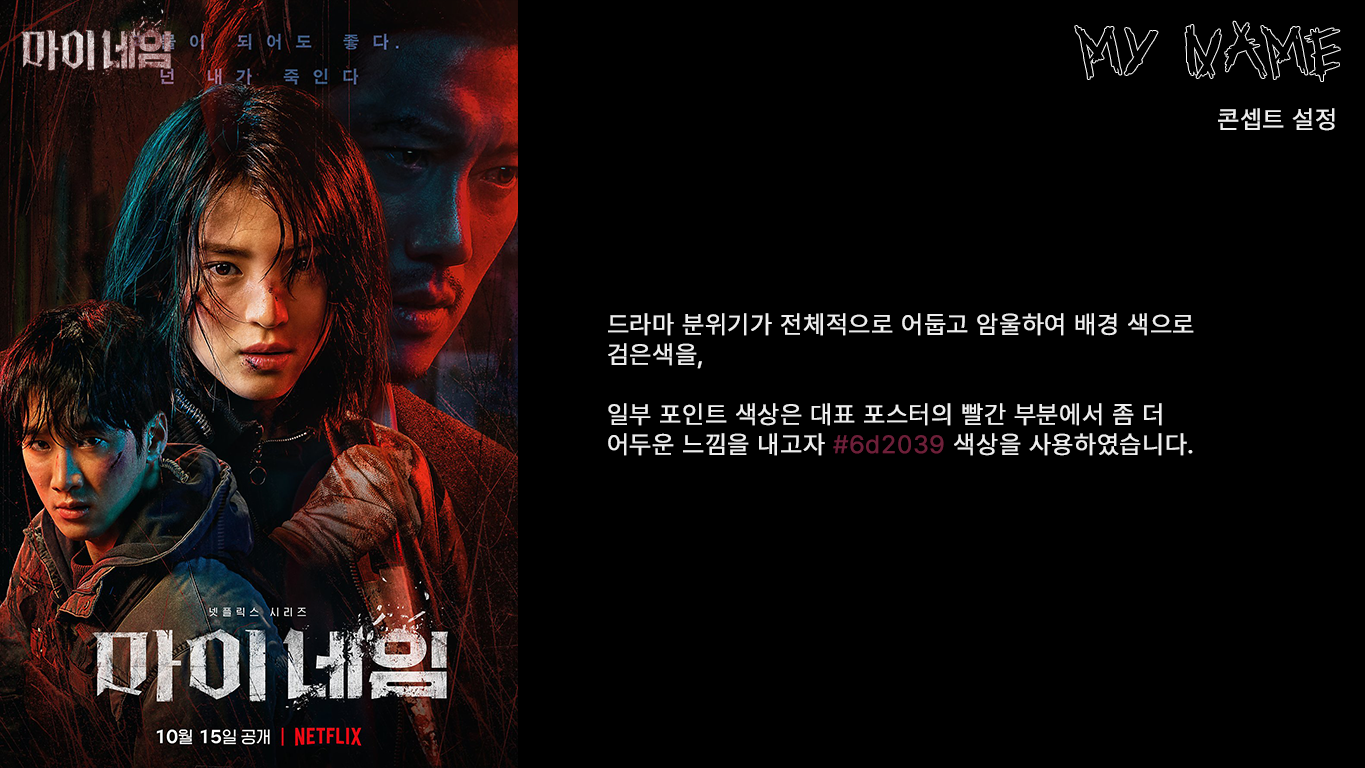
<style>
.page{position:relative;width:1365px;height:768px;background:#000000}
.page>*{position:absolute;margin:0}
.t1{font:25px "Pretendard-Regular";letter-spacing:0.03em;color:#eeeeee;font-weight:bold}
.t2{font:25px/30px "Pretendard-Regular";letter-spacing:0.03em;color:#eeeeee;font-weight:bold}
.t3{font:25px/30px "Pretendard-Regular";letter-spacing:0.03em;color:#6d2039;font-weight:bold}
</style>
<div class="page">
<p class="t1" style="left:1218px;top:108px;width:117px;height:23px">콘셉트 설정</p>
<p class="t2" style="left:608px;top:313px;width:586px;height:143px">드라마 분위기가 전체적으로 어둡고 암울하여 배경 색으로<br>검은색을,<br><br>일부 포인트 색상은 대표 포스터의 빨간 부분에서 좀 더<br>어두운 느낌을 내고자 <span class="t3">#6d2039</span> 색상을 사용하였습니다.</p>
</div>
